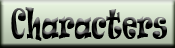
<style>
.page{position:relative;width:175px;height:48px}
.page>*{position:absolute;margin:0}
.t1{font:36.8px "Ravie";color:#000000;scale:0.55 1}
</style>
<div class="page">
<p class="t1" style="left:11px;top:7px;width:156px;height:34px">Characters</p>
</div>
